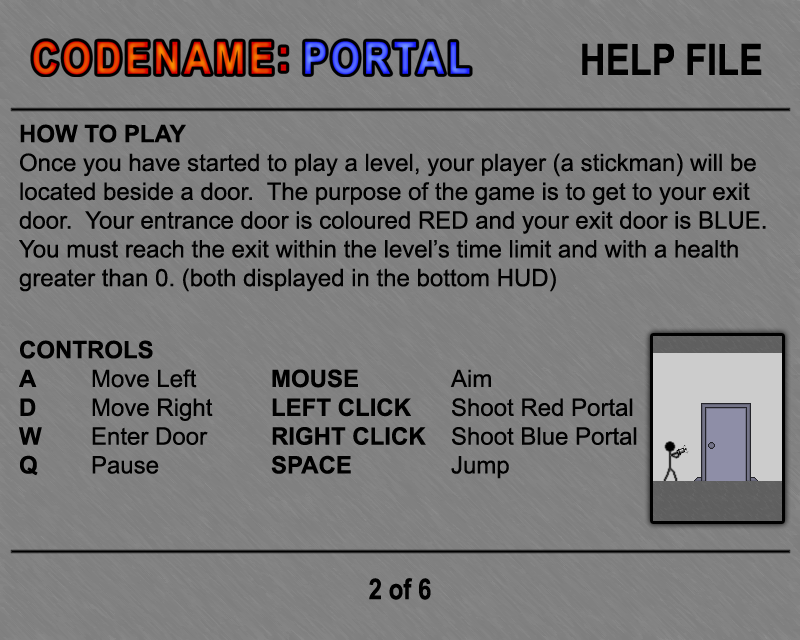
<style>
.page{position:relative;width:800px;height:640px;background:#808080}
.page>*{position:absolute;margin:0}
.t1{font:43.2px "Arial-BoldMT";color:#000000;scale:0.83 1}
.t2{font:24px "ArialMT";color:#000000}
.t3{font:24px "Arial-BoldMT";color:#000000}
.t4{font:28.8px "Arial-BoldMT";color:#000000;scale:0.83 1}
</style>
<div class="page">
<p class="t1" style="left:582px;top:43px;width:180px;height:32px">HELP FILE</p>
<p class="t2" style="left:19px;top:124px;width:747px;height:355px"><span class="t3">HOW TO PLAY<br></span>Once you have started to play a level, your player (a stickman) will be located beside a door.  The purpose of the game is to get to your exit door.  Your entrance door is coloured RED and your exit door is BLUE.  You must reach the exit within the level’s time limit and with a health greater than 0. (both displayed in the bottom HUD)<br> <br><span class="t3">CONTROLS<br>A   </span>Move Left<span class="t3">   MOUSE   </span>Aim<br><span class="t3">D  </span>Move Right<span class="t3">  LEFT CLICK   </span>Shoot Red Portal<br><span class="t3">W  </span>Enter Door <span class="t3"> RIGHT CLICK </span>Shoot Blue Portal<br><span class="t3">Q  </span>Pause   <span class="t3"> SPACE   </span>Jump</p>
<p class="t4" style="left:369px;top:578px;width:62px;height:22px">2 of 6</p>
</div>
